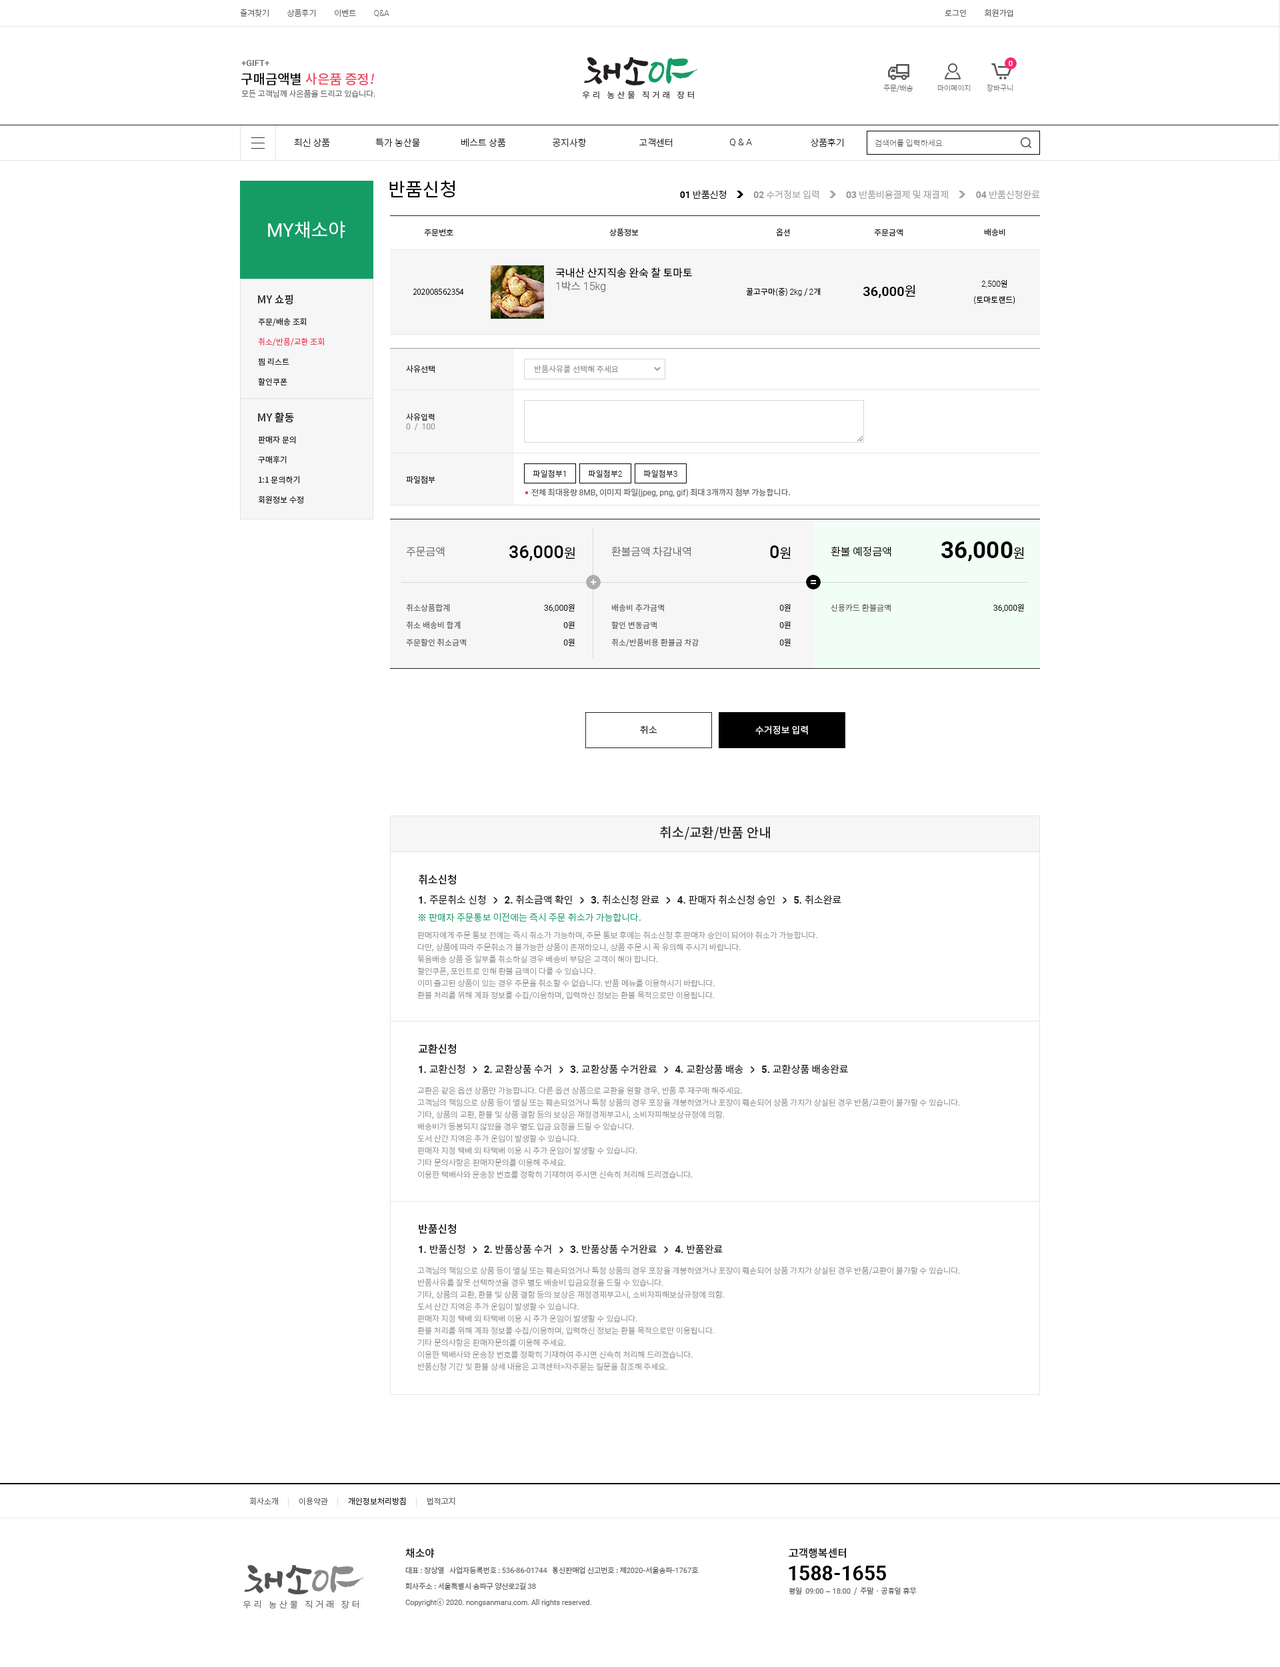
<style>
.page{position:relative;width:1280px;height:1667px;background:#ffffff}
.page>*{position:absolute;margin:0}
.t1{font:8px "NotoSansCJKkr-Light";color:#666666}
.t2{font:8px "Roboto-Light";color:#666666}
.t3{font:8px "NotoSansCJKkr-DemiLight";color:#666666}
.t4{font:8.7px "Roboto-Medium";color:#666666}
.t5{font:13.3px "NotoSansCJKkr-Medium";color:#ea475c}
.t6{font:13.3px "NotoSansCJKkr-Medium";color:#000000}
.t7{font:13.3px "NotoSansCJKkr-Medium";color:#ea475c;font-style:italic}
.t8{font:7.3px "NotoSansCJKkr-Thin";color:#666666}
.t9{font:9.3px "NotoSansCJKkr-Light";color:#222222}
.t10{font:9.3px "Roboto-Light";color:#222222}
.t11{font:8px "NotoSansCJKkr-Thin";color:#666666}
.t12{font:18.7px "NotoSansCJKkr-Regular";color:#000000}
.t13{font:9.3px "NotoSansCJKkr-Light";color:#000000}
.t14{font:9.3px "Roboto-Bold";color:#000000}
.t15{font:9.3px "NotoSansCJKkr-Light";color:#999999}
.t16{font:9.3px "Roboto-Bold";color:#999999}
.t17{font:18.7px "NotoSansCJKkr-Regular";color:#ffffff}
.t18{font:18.7px "Roboto-Regular";color:#ffffff}
.t19{font:8px "NotoSansCJKkr-Regular";color:#222222}
.t20{font:10.7px "NotoSansCJKkr-Regular";color:#000000}
.t21{font:10.7px "Roboto-Light";color:#666666}
.t22{font:10.7px "NotoSansCJKkr-Light";color:#666666}
.t23{font:8px/16px "NotoSansCJKkr-Light";color:#000000}
.t24{font:8px/16px "Roboto-Light";color:#000000}
.t25{font:8px "NotoSansCJKkr-Light";color:#000000}
.t26{font:8px "Roboto-Light";color:#000000}
.t27{font:13.3px "Roboto-Bold";color:#000000}
.t28{font:13.3px "NotoSansCJKkr-DemiLight";color:#000000}
.t29{font:10.7px "NotoSansCJKkr-Medium";color:#222222}
.t30{font:8px/20px "NotoSansCJKkr-Regular";color:#ea475c}
.t31{font:8px/20px "NotoSansCJKkr-Regular";color:#222222}
.t32{font:8px "NotoSansCJKkr-Regular";color:#999999}
.t33{font:8px "Roboto-Regular";color:#999999}
.t34{font:8px "NotoSansCJKkr-Light";color:#222222}
.t35{font:8px "Roboto-Light";color:#222222}
.t36{font:8px "Roboto-Regular";color:#666666}
.t37{font:8px "NotoSansCJKkr-Regular";color:#666666}
.t38{font:18px "Roboto-Medium";color:#000000}
.t39{font:23.3px "Roboto-Bold";color:#000000}
.t40{font:10.7px "NotoSansCJKkr-Light";color:#000000}
.t41{font:8px/17.3px "NotoSansCJKkr-Regular";color:#666666}
.t42{font:8px/17.3px "Roboto-Regular";color:#222222}
.t43{font:8px/17.3px "NotoSansCJKkr-Regular";color:#222222}
.t44{font:8px "Roboto-Regular";color:#222222}
.t45{font:9.3px "NotoSansCJKkr-DemiLight";color:#222222}
.t46{font:9.3px "NotoSansCJKkr-DemiLight";color:#ffffff}
.t47{font:13.3px "NotoSansCJKkr-Medium";color:#222222}
.t48{font:10px "NotoSansCJKkr-Regular";color:#222222}
.t49{font:10px "Roboto-Bold";color:#222222}
.t50{font:10px "BMHANNAPro";color:#222222}
.t51{font:9.3px "NotoSansCJKkr-Light";color:#159c65}
.t52{font:8px/12px "NotoSansCJKkr-Light";color:#999999}
</style>
<div class="page">
<p class="t1" style="left:240px;top:9px;width:149px;height:8px">즐겨찾기          상품후기          이벤트          <span class="t2">Q&amp;A</span></p>
<p class="t3" style="left:945px;top:9px;width:68px;height:8px">로그인          회원가입</p>
<p class="t4" style="left:241px;top:60px;width:28px;height:6px">+GIFT+</p>
<p class="t5" style="left:241px;top:73px;width:134px;height:12px"><span class="t6">구매금액별 </span>사은품 증정<span class="t7">!</span></p>
<p class="t1" style="left:241px;top:89px;width:134px;height:8px">모든 고객님께 사은품을 드리고 있습니다.</p>
<p class="t8" style="left:883px;top:84px;width:30px;height:8px">주문/배송</p>
<p class="t8" style="left:937px;top:85px;width:34px;height:7px">마이페이지</p>
<p class="t8" style="left:987px;top:84px;width:26px;height:8px">장바구니</p>
<p class="t9" style="left:294px;top:138px;width:36px;height:9px">최신 상품</p>
<p class="t9" style="left:375px;top:138px;width:45px;height:9px">특가 농산물</p>
<p class="t9" style="left:461px;top:138px;width:45px;height:9px">베스트 상품</p>
<p class="t9" style="left:553px;top:138px;width:34px;height:9px">공지사항</p>
<p class="t9" style="left:639px;top:138px;width:34px;height:9px">고객센터</p>
<p class="t10" style="left:730px;top:139px;width:22px;height:8px">Q &amp; A</p>
<p class="t9" style="left:811px;top:138px;width:33px;height:9px">상품후기</p>
<p class="t11" style="left:875px;top:139px;width:68px;height:8px">검색어를 입력하세요</p>
<p class="t12" style="left:389px;top:180px;width:66px;height:18px">반품신청</p>
<p class="t13" style="left:680px;top:190px;width:46px;height:9px"><span class="t14">01</span> 반품신청</p>
<p class="t15" style="left:753px;top:190px;width:66px;height:9px"><span class="t16">02</span> 수거정보 입력</p>
<p class="t15" style="left:846px;top:190px;width:102px;height:9px"><span class="t16">03</span> 반품비용결제 및 재결제</p>
<p class="t15" style="left:976px;top:190px;width:64px;height:9px"><span class="t16">04</span> 반품신청완료</p>
<p class="t17" style="left:268px;top:221px;width:77px;height:18px"><span class="t18">MY</span>채소야</p>
<p class="t19" style="left:424px;top:229px;width:29px;height:7px">주문번호</p>
<p class="t19" style="left:609px;top:229px;width:30px;height:7px">상품정보</p>
<p class="t19" style="left:776px;top:229px;width:14px;height:7px">옵션</p>
<p class="t19" style="left:874px;top:229px;width:29px;height:7px">주문금액</p>
<p class="t19" style="left:984px;top:228px;width:21px;height:8px">배송비</p>
<p class="t20" style="left:555px;top:267px;width:137px;height:11px">국내산 산지직송 완숙 찰 토마토</p>
<p class="t21" style="left:556px;top:281px;width:49px;height:11px">1<span class="t22">박스 </span>15kg</p>
<p class="t23" style="left:974px;top:279px;width:41px;height:26px;text-align:center"><span class="t24">2,500</span>원<br>(토마토랜드)</p>
<p class="t25" style="left:413px;top:289px;width:51px;height:6px">202008562354</p>
<p class="t25" style="left:746px;top:287px;width:75px;height:10px">꿀고구마(중) <span class="t26">2kg</span> / <span class="t26">2</span>개</p>
<p class="t27" style="left:863px;top:285px;width:52px;height:13px">36,000<span class="t28">원</span></p>
<p class="t29" style="left:258px;top:294px;width:35px;height:11px">MY 쇼핑</p>
<p class="t30" style="left:258px;top:317px;width:66px;height:69px"><span class="t31">주문/배송 조회<br></span>취소/반품/교환 조회<br><span class="t31">찜 리스트<br>할인쿠폰</span></p>
<p class="t19" style="left:406px;top:365px;width:29px;height:8px">사유선택</p>
<p class="t32" style="left:535px;top:365px;width:84px;height:8px">반품사유를 선택해 주세요</p>
<p class="t29" style="left:258px;top:412px;width:36px;height:11px">MY 활동</p>
<p class="t33" style="left:406px;top:413px;width:29px;height:17px"><span class="t19">사유입력<br></span>0  /  100</p>
<p class="t31" style="left:258px;top:435px;width:45px;height:68px">판매자 문의<br>구매후기<br>1:1 문의하기<br>회원정보 수정</p>
<p class="t34" style="left:533px;top:469px;width:32px;height:8px">파일첨부<span class="t35">1</span></p>
<p class="t34" style="left:588px;top:469px;width:34px;height:8px">파일첨부<span class="t35">2</span></p>
<p class="t34" style="left:643px;top:469px;width:34px;height:8px">파일첨부<span class="t35">3</span></p>
<p class="t19" style="left:406px;top:475px;width:29px;height:8px">파일첨부</p>
<p class="t36" style="left:531px;top:488px;width:259px;height:9px"><span class="t37">전체 최대용량 </span>8MB<span class="t37">, 이미지 파일(</span>jpeg, png, gif<span class="t37">) 최대 </span>3<span class="t37">개까지 첨부 가능합니다.</span></p>
<p class="t38" style="left:509px;top:545px;width:66px;height:16px">36,000<span class="t28">원</span></p>
<p class="t38" style="left:770px;top:545px;width:21px;height:14px">0<span class="t28">원</span></p>
<p class="t39" style="left:941px;top:541px;width:83px;height:20px">36,000<span class="t28">원</span></p>
<p class="t22" style="left:406px;top:547px;width:39px;height:10px">주문금액</p>
<p class="t22" style="left:611px;top:546px;width:80px;height:11px">환불금액 차감내역</p>
<p class="t40" style="left:831px;top:546px;width:60px;height:11px">환불 예정금액</p>
<p class="t41" style="left:406px;top:603px;width:60px;height:43px">취소상품합계<br>취소 배송비 합계<br>주문할인 취소금액</p>
<p class="t42" style="left:544px;top:603px;width:31px;height:43px;text-align:right">36,000<span class="t43">원<br></span>0<span class="t43">원<br></span>0<span class="t43">원</span></p>
<p class="t41" style="left:611px;top:603px;width:88px;height:44px">배송비 추가금액<br>할인 변동금액<br>취소/반품비용 환불금 차감</p>
<p class="t42" style="left:779px;top:603px;width:12px;height:43px;text-align:right">0<span class="t43">원<br></span>0<span class="t43">원<br></span>0<span class="t43">원</span></p>
<p class="t37" style="left:831px;top:603px;width:60px;height:8px">신용카드 환불금액</p>
<p class="t44" style="left:993px;top:603px;width:31px;height:9px">36,000<span class="t19">원</span></p>
<p class="t45" style="left:640px;top:725px;width:17px;height:9px">취소</p>
<p class="t46" style="left:755px;top:725px;width:53px;height:10px">수거정보 입력</p>
<p class="t47" style="left:660px;top:826px;width:110px;height:14px">취소/교환/반품 안내</p>
<p class="t29" style="left:419px;top:874px;width:37px;height:11px">취소신청</p>
<p class="t48" style="left:419px;top:895px;width:422px;height:10px"><span class="t49">1. </span>주문취소 신청   <span class="t50">&gt;  </span><span class="t49">2. </span>취소금액 확인   <span class="t50">&gt;  </span><span class="t49">3. </span>취소신청 완료   <span class="t50">&gt;  </span><span class="t49">4. </span>판매자 취소신청 승인   <span class="t50">&gt;  </span><span class="t49">5. </span>취소완료</p>
<p class="t51" style="left:418px;top:913px;width:223px;height:9px">※ 판매자 주문통보 이전에는 즉시 주문 취소가 가능합니다.</p>
<p class="t52" style="left:417px;top:931px;width:400px;height:68px">판매자에게 주문 통보 전에는 즉시 취소가 가능하며, 주문 통보 후에는 취소신청 후 판매자 승인이 되어야 취소가 가능합니다.<br>다만, 상품에 따라 주문취소가 불가능한 상품이 존재하오니, 상품 주문 시 꼭 유의해 주시기 바랍니다.<br>묶음배송 상품 중 일부를 취소하실 경우 배송비 부담은 고객이 해야 합니다.<br>할인쿠폰, 포인트로 인해 환불 금액이 다를 수 있습니다.<br>이미 출고된 상품이 있는 경우 주문을 취소할 수 없습니다. 반품 메뉴를 이용하시기 바랍니다.<br>환불 처리를 위해 계좌 정보를 수집/이용하며, 입력하신 정보는 환불 목적으로만 이용됩니다.</p>
<p class="t29" style="left:419px;top:1043px;width:37px;height:11px">교환신청</p>
<p class="t48" style="left:419px;top:1064px;width:429px;height:10px"><span class="t49">1. </span>교환신청   <span class="t50">&gt;  </span><span class="t49">2. </span>교환상품 수거   <span class="t50">&gt;  </span><span class="t49">3. </span>교환상품 수거완료   <span class="t50">&gt;  </span><span class="t49">4. </span>교환상품 배송   <span class="t50">&gt;  </span><span class="t49">5. </span>교환상품 배송완료</p>
<p class="t52" style="left:417px;top:1086px;width:543px;height:93px">교환은 같은 옵션 상품만 가능합니다. 다른 옵션 상품으로 교환을 원할 경우, 반품 후 재구매 해주세요.<br>고객님의 책임으로 상품 등이 멸실 또는 훼손되었거나 특정 상품의 경우 포장을 개봉하였거나 포장이 훼손되어 상품 가치가 상실된 경우 반품/교환이 불가할 수 있습니다.<br>기타, 상품의 교환, 환불 및 상품 결함 등의 보상은 재정경제부고시, 소비자피해보상규정에 의함.<br>배송비가 동봉되지 않았을 경우 별도 입금 요청을 드릴 수 있습니다.<br>도서 산간 지역은 추가 운임이 발생할 수 있습니다.<br>판매자 지정 택배 외 타택배 이용 시 추가 운임이 발생할 수 있습니다.<br>기타 문의사항은 판매자문의를 이용해 주세요. <br>이용한 택배사와 운송장 번호를 정확히 기재하여 주시면 신속히 처리해 드리겠습니다.</p>
<p class="t29" style="left:419px;top:1223px;width:37px;height:11px">반품신청</p>
<p class="t48" style="left:419px;top:1244px;width:304px;height:10px"><span class="t49">1. </span>반품신청   <span class="t50">&gt;  </span><span class="t49">2. </span>반품상품 수거   <span class="t50">&gt;  </span><span class="t49">3. </span>반품상품 수거완료   <span class="t50">&gt;  </span><span class="t49">4. </span>반품완료</p>
<p class="t52" style="left:417px;top:1266px;width:543px;height:104px">고객님의 책임으로 상품 등이 멸실 또는 훼손되었거나 특정 상품의 경우 포장을 개봉하였거나 포장이 훼손되어 상품 가치가 상실된 경우 반품/교환이 불가할 수 있습니다.<br>반품사유를 잘못 선택하셧을 경우 별도 배송비 입금요청을 드릴 수 있습니다.<br>기타, 상품의 교환, 환불 및 상품 결함 등의 보상은 재정경제부고시, 소비자피해보상규정에 의함.<br>도서 산간 지역은 추가 운임이 발생할 수 있습니다.<br>판매자 지정 택배 외 타택배 이용 시 추가 운임이 발생할 수 있습니다.<br>환불 처리를 위해 계좌 정보를 수집/이용하며, 입력하신 정보는 환불 목적으로만 이용됩니다.<br>기타 문의사항은 판매자문의를 이용해 주세요. <br>이용한 택배사와 운송장 번호를 정확히 기재하여 주시면 신속히 처리해 드리겠습니다.<br>반품신청 기간 및 환불 상세 내용은 고객센터&gt;자주묻는 질문을 참조해 주세요.</p>
</div>
